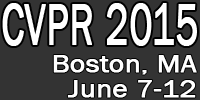
<style>
.page{position:relative;width:200px;height:100px;background:#333333}
.page>*{position:absolute;margin:0}
.t1{font:60px "FranklinGothic-Book";color:#ffffff;font-weight:bold;scale:0.65 1}
.t2{font:25px/25px "FranklinGothic-Book";color:#ffffff;font-weight:bold;scale:1.15 1}
</style>
<div class="page">
<p class="t1" style="left:2px;top:3px;width:195px;height:43px">CVPR 2015</p>
<p class="t2" style="left:53px;top:55px;width:144px;height:43px;text-align:right">Boston, MA<br>June 7-12</p>
</div>
